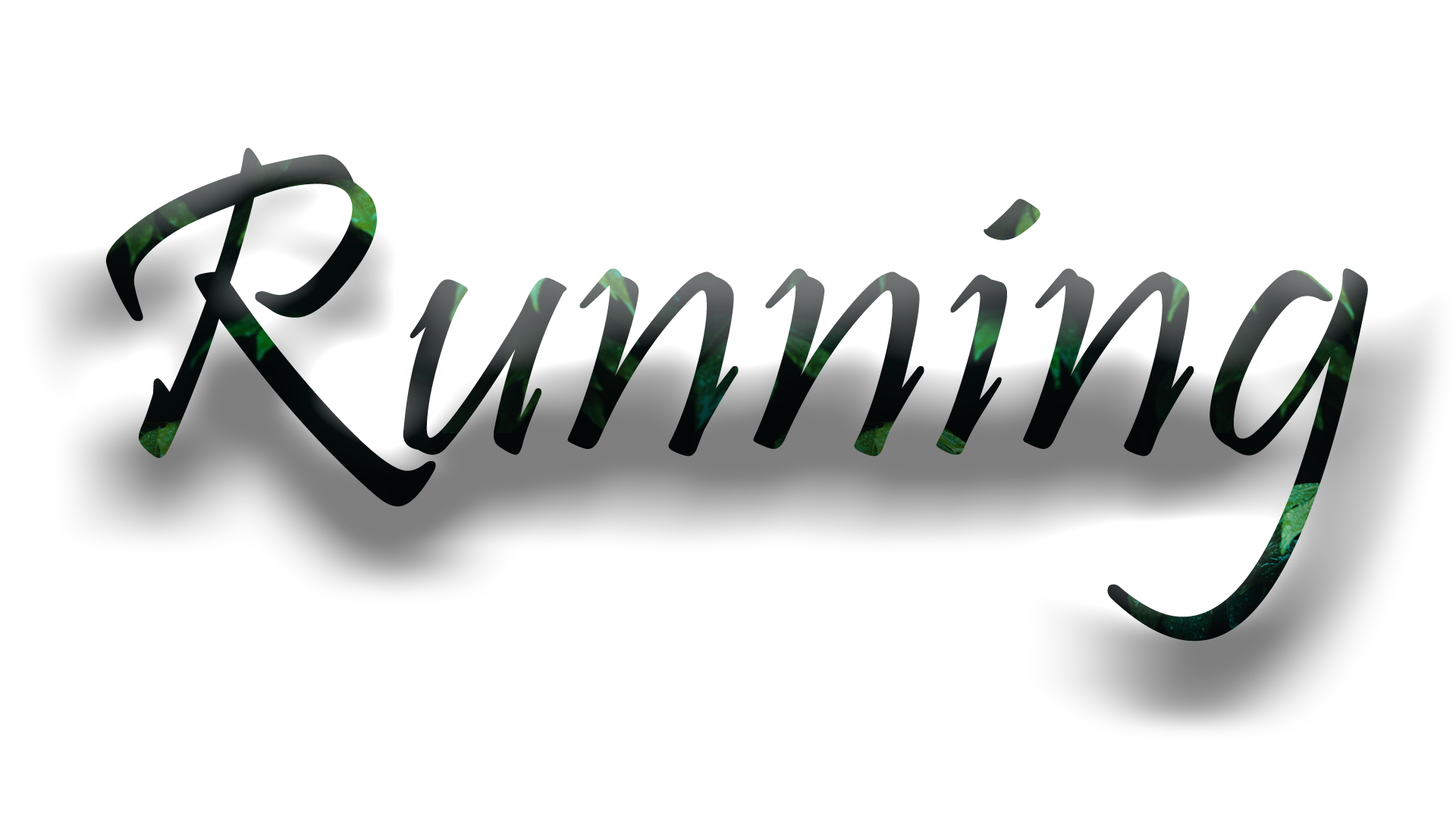
<style>
.page{position:relative;width:1456px;height:819px;background:#ffffff}
.page>*{position:absolute;margin:0}
.t1{font:442.4px "Pristina-Regular"}
</style>
<div class="page">
<p class="t1" style="left:105px;top:148px;width:1263px;height:494px">Running</p>
</div>
